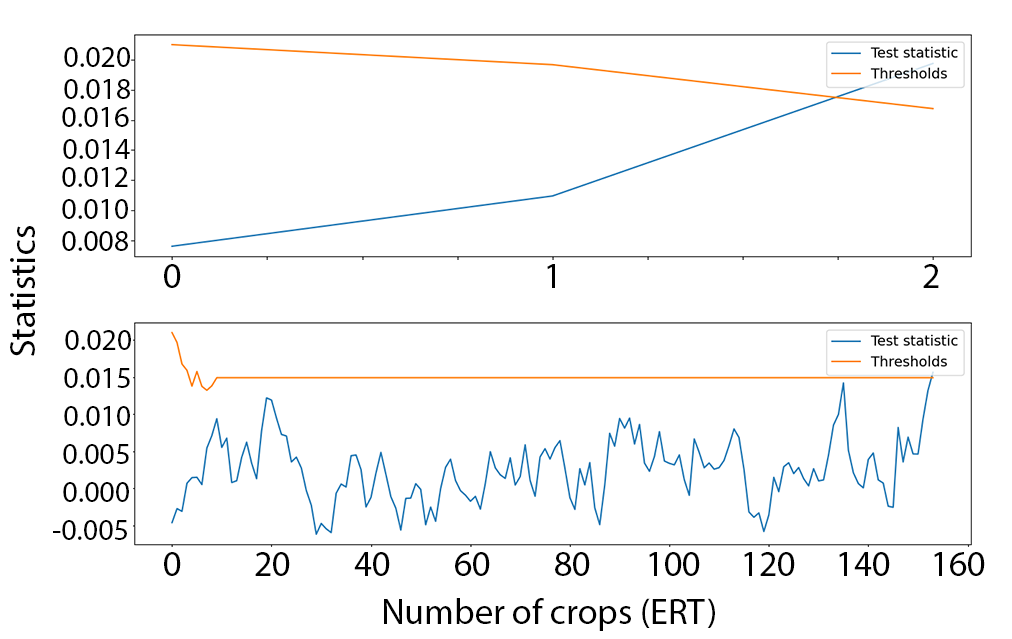
<style>
.page{position:relative;width:1012px;height:639px;background:#ffffff}
.page>*{position:absolute;margin:0}
.t1{font:30px "MyriadPro-Regular";color:#000000}
.t2{font:36px "MyriadPro-Regular";color:#000000}
</style>
<div class="page">
<p class="t1" style="left:64px;top:47px;width:66px;height:20px">0.020</p>
<p class="t1" style="left:64px;top:79px;width:66px;height:20px">0.018</p>
<p class="t1" style="left:62px;top:107px;width:67px;height:20px">0.016</p>
<p class="t1" style="left:63px;top:139px;width:67px;height:20px">0.014</p>
<p class="t1" style="left:62px;top:167px;width:66px;height:20px">0.012</p>
<p class="t1" style="left:62px;top:199px;width:66px;height:20px">0.010</p>
<p class="t2" style="left:10px;top:226px;width:25px;height:130px;rotate:-90deg">Statistics</p>
<p class="t1" style="left:62px;top:231px;width:66px;height:20px">0.008</p>
<p class="t2" style="left:164px;top:264px;width:17px;height:24px">0</p>
<p class="t2" style="left:547px;top:264px;width:8px;height:24px">1</p>
<p class="t2" style="left:923px;top:264px;width:16px;height:24px">2</p>
<p class="t1" style="left:65px;top:330px;width:66px;height:20px">0.020</p>
<p class="t1" style="left:64px;top:368px;width:66px;height:20px">0.015</p>
<p class="t1" style="left:64px;top:406px;width:66px;height:20px">0.010</p>
<p class="t1" style="left:63px;top:444px;width:66px;height:20px">0.005</p>
<p class="t1" style="left:63px;top:482px;width:66px;height:20px">0.000</p>
<p class="t1" style="left:53px;top:520px;width:74px;height:20px">-0.005</p>
<p class="t2" style="left:164px;top:552px;width:17px;height:24px">0</p>
<p class="t2" style="left:255px;top:552px;width:35px;height:24px">200</p>
<p class="t2" style="left:354px;top:552px;width:36px;height:24px">400</p>
<p class="t2" style="left:455px;top:552px;width:35px;height:24px">600</p>
<p class="t2" style="left:555px;top:552px;width:35px;height:24px">800</p>
<p class="t2" style="left:649px;top:552px;width:51px;height:24px">1000</p>
<p class="t2" style="left:744px;top:552px;width:51px;height:24px">1200</p>
<p class="t2" style="left:839px;top:552px;width:51px;height:24px">140</p>
<p class="t2" style="left:934px;top:552px;width:51px;height:24px">160</p>
<p class="t2" style="left:384px;top:598px;width:331px;height:33px">Number of crops (ERT)</p>
</div>
